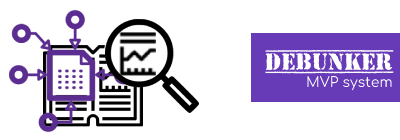
<style>
.page{position:relative;width:400px;height:140px;background:#ffffff}
.page>*{position:absolute;margin:0}
.t1{font:24px "TopSecret-Bold";color:#ffffff}
.t2{font:14px "Comfortaa-Regular";color:#ffffff}
</style>
<div class="page">
<p class="t1" style="left:265px;top:49px;width:129px;height:25px">DEBUNKER</p>
<p class="t2" style="left:307px;top:76px;width:85px;height:15px">MVP system</p>
</div>
